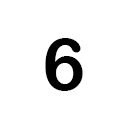
<style>
.page{position:relative;width:128px;height:128px;background:#ffffff}
.page>*{position:absolute;margin:0}
.t1{font:73px "ArialRoundedMTBold";letter-spacing:0.4em;color:#000000}
</style>
<div class="page">
<p class="t1" style="left:45px;top:38px;width:38px;height:53px">6</p>
</div>
